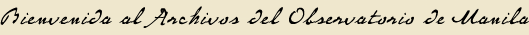
<style>
.page{position:relative;width:529px;height:35px;background:#efe7cd}
.page>*{position:absolute;margin:0}
.t1{font:29.2px "P22MonetRegular";letter-spacing:0.06em;color:#000000}
</style>
<div class="page">
<p class="t1" style="left:0px;top:6px;width:529px;height:22px">Bienvenida al Archivos del Observatorio de Manila</p>
</div>
